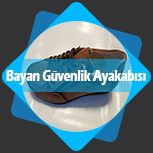
<style>
.page{position:relative;width:153px;height:153px;background:#333333}
.page>*{position:absolute;margin:0}
.t1{font:15.7px "ErasITC-Bold";color:#ffffff;scale:0.67 1}
</style>
<div class="page">
<p class="t1" style="left:6px;top:70px;width:140px;height:15px">Bayan Güvenlik Ayakabısı</p>
</div>
